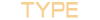
<style>
.page{position:relative;width:100px;height:20px;background:#ffffff}
.page>*{position:absolute;margin:0}
.t1{font:23px "MicrogrammaD-MediExte";letter-spacing:0.075em;color:#f7d093;font-weight:bold;scale:0.7 1}
</style>
<div class="page">
<p class="t1" style="left:21px;top:2px;width:57px;height:16px">TYPE</p>
</div>
